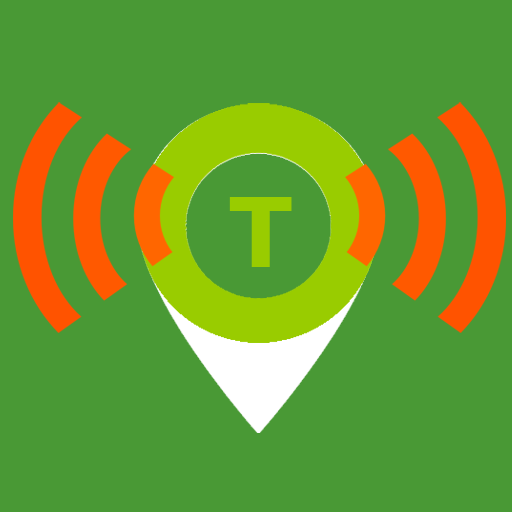
<style>
.page{position:relative;width:512px;height:512px;background:#499935}
.page>*{position:absolute;margin:0}
.t1{font:96px "Verdana-Bold";color:#99cc00}
</style>
<div class="page">
<p class="t1" style="left:229px;top:197px;width:63px;height:70px">T</p>
</div>
